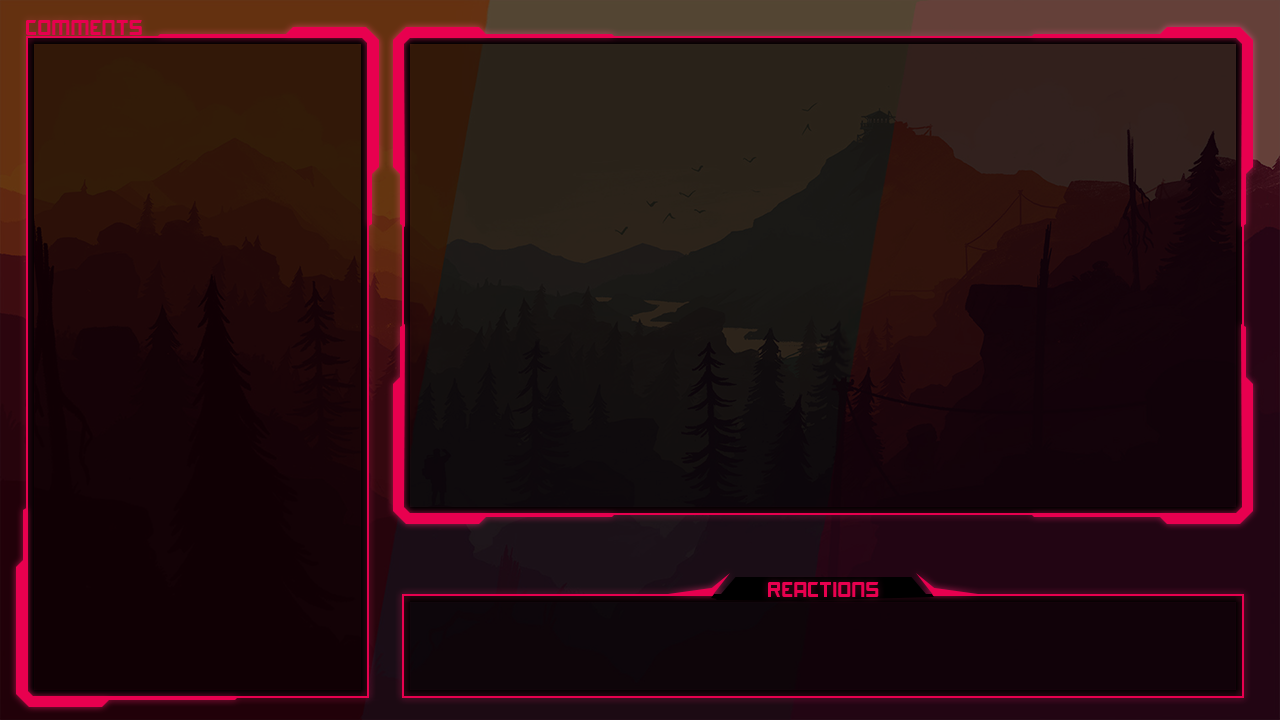
<style>
.page{position:relative;width:1280px;height:720px}
.page>*{position:absolute;margin:0}
.t1{font:20.6px "UTM-Akashi";color:#e8004f}
</style>
<div class="page">
<p class="t1" style="left:26px;top:20px;width:116px;height:15px">COMMENTS</p>
<p class="t1" style="left:768px;top:582px;width:111px;height:15px">REACTIONS</p>
</div>
